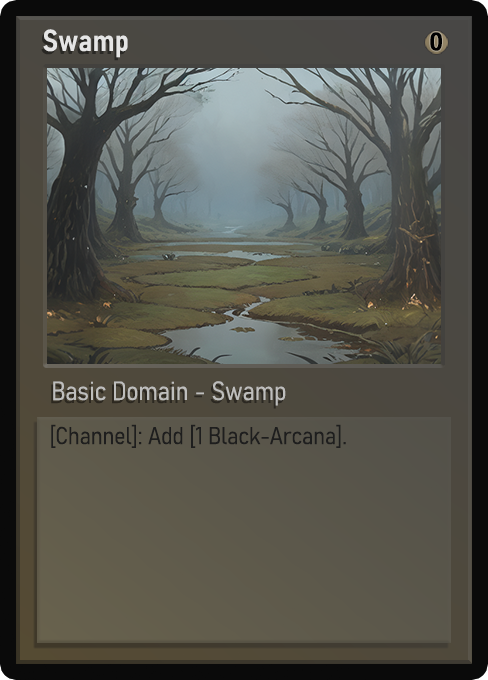
<style>
.page{position:relative;width:488px;height:680px}
.page>*{position:absolute;margin:0}
.t1{font:30px "Bahnschrift-SemiBoldSemiCondensed";color:#f2f2f2;font-weight:bold}
.t2{font:25px "WTRRoycroft";color:#000000;font-weight:bold;scale:1.09 1}
.t3{font:26px "Bahnschrift-LightSemiCondensed";color:#c8c8c8;font-weight:bold}
.t4{font:24px "Bahnschrift-LightSemiCondensed";color:#1e1e1e;font-weight:bold}
</style>
<div class="page">
<p class="t1" style="left:43px;top:29px;width:85px;height:29px;opacity:0.9">Swamp</p>
<p class="t2" style="left:430px;top:32px;width:12px;height:19px">0</p>
<p class="t3" style="left:53px;top:381px;width:233px;height:25px;opacity:0.9">Basic Domain - Swamp</p>
<p class="t4" style="left:51px;top:424px;width:295px;height:24px">[Channel]: Add [1 Black-Arcana].</p>
</div>
